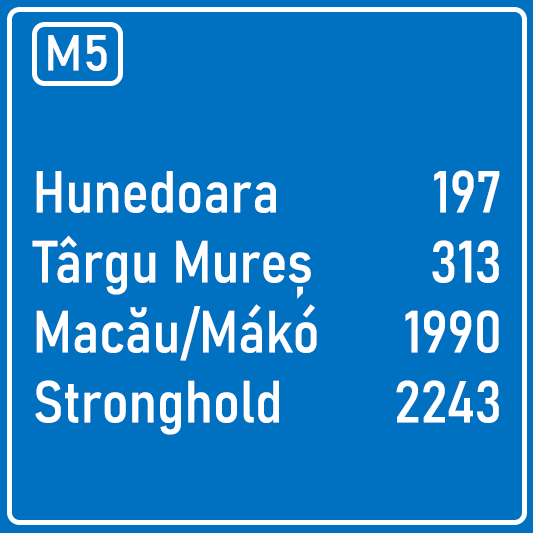
<style>
.page{position:relative;width:533px;height:533px;background:#0070c0}
.page>*{position:absolute;margin:0}
.t1{font:50px "Bahnschrift";color:#ffffff}
.t2{font:58.3px "Bahnschrift-SemiCondensed";color:#ffffff}
</style>
<div class="page">
<p class="t1" style="left:48px;top:35px;width:59px;height:36px">M5</p>
<p class="t2" style="left:32px;top:171px;width:285px;height:264px">Hunedoara<br>Târgu Mureș<br>Macău/Mákó<br>Stronghold</p>
<p class="t2" style="left:396px;top:170px;width:104px;height:253px;text-align:right">197<br>313<br>1990<br>2243</p>
</div>
